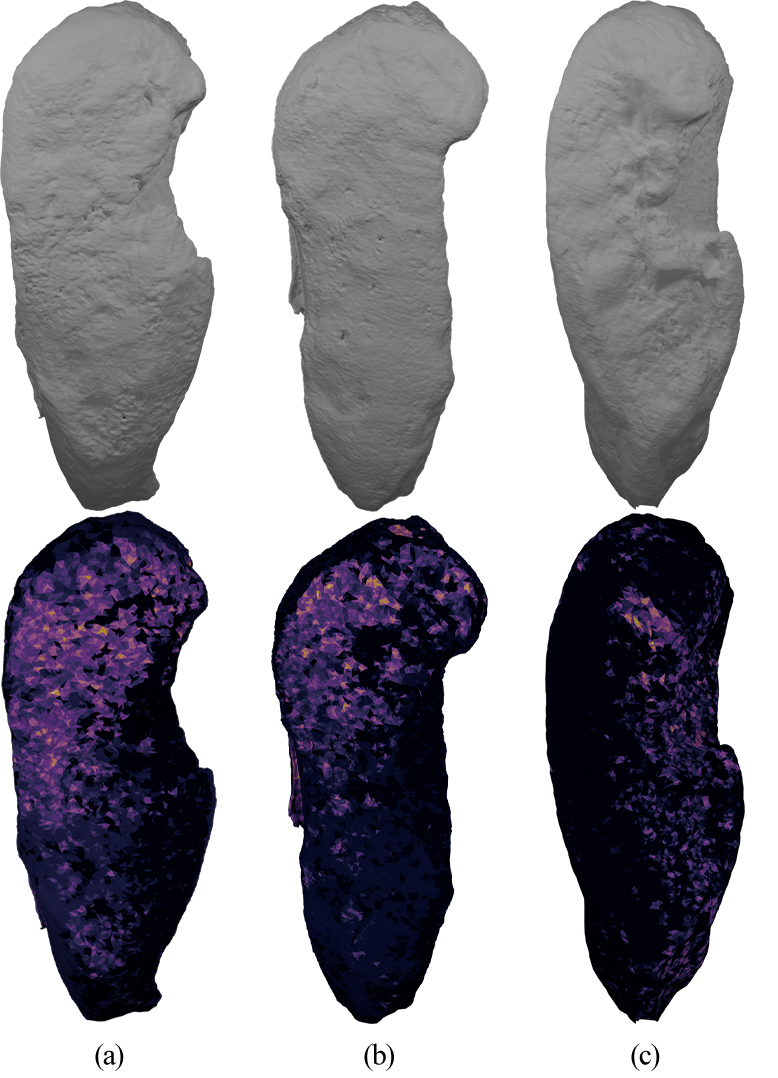
<style>
.page{position:relative;width:778px;height:1078px;background:#ffffff}
.page>*{position:absolute;margin:0}
.t1{font:30px "TimesNewRomanPSMT";letter-spacing:-0.05em;color:#000000}
</style>
<div class="page">
<p class="t1" style="left:95px;top:1043px;width:29px;height:28px">(a)</p>
<p class="t1" style="left:364px;top:1043px;width:30px;height:28px">(b)</p>
<p class="t1" style="left:631px;top:1043px;width:29px;height:28px">(c)</p>
</div>
